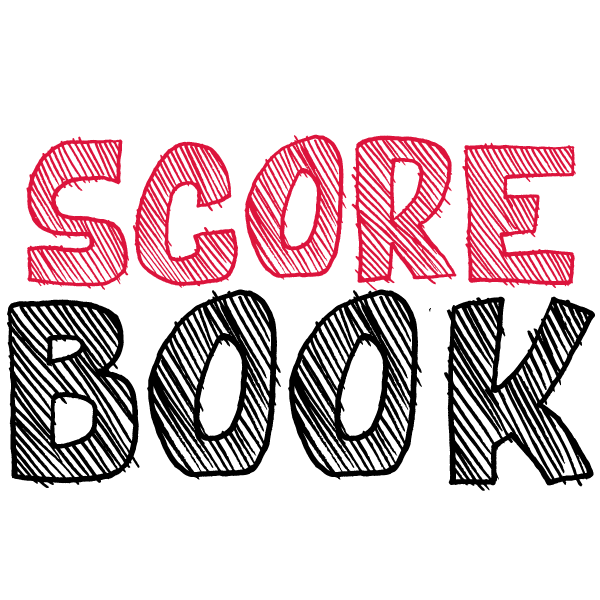
<style>
.page{position:relative;width:600px;height:600px;background:#ffffff}
.page>*{position:absolute;margin:0}
.t1{font:84px "BestPrices";color:#dc143c}
.t2{font:110px "BestPrices";color:#000000}
</style>
<div class="page">
<p class="t1" style="left:26px;top:134px;width:550px;height:157px">SCORE</p>
<p class="t2" style="left:7px;top:289px;width:588px;height:202px">BOOK</p>
</div>
